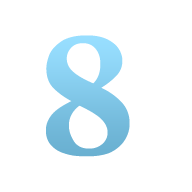
<style>
.page{position:relative;width:192px;height:192px;background:#ffffff}
.page>*{position:absolute;margin:0}
.t1{font:164.4px "PerpetuaTitlingMT-Bold";color:#80c6e7}
</style>
<div class="page">
<p class="t1" style="left:46px;top:35px;width:84px;height:122px">8</p>
</div>
